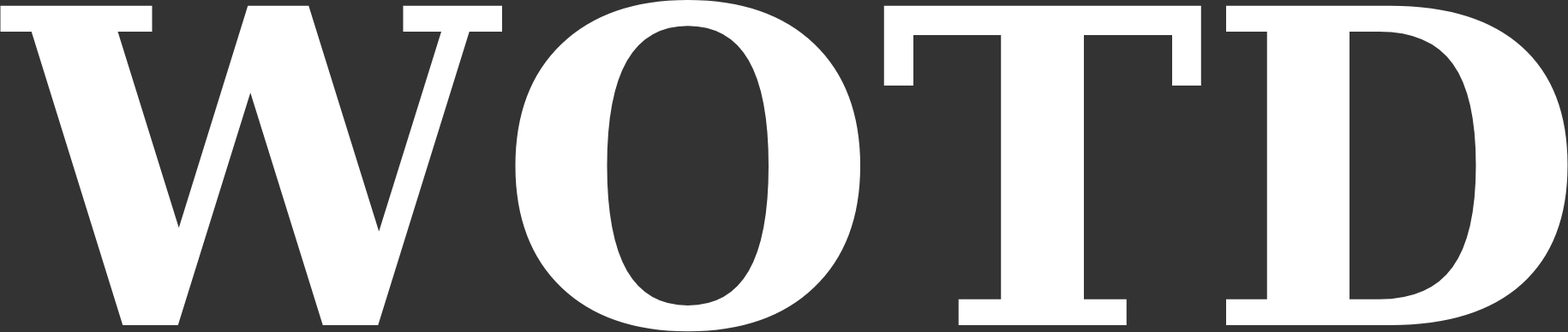
<style>
.page{position:relative;width:1568px;height:332px;background:#333333}
.page>*{position:absolute;margin:0}
.t1{font:438.7px "DejaVuSerif-Bold";color:#ffffff}
</style>
<div class="page">
<p class="t1" style="left:0px;top:0px;width:1568px;height:332px">WOTD</p>
</div>
